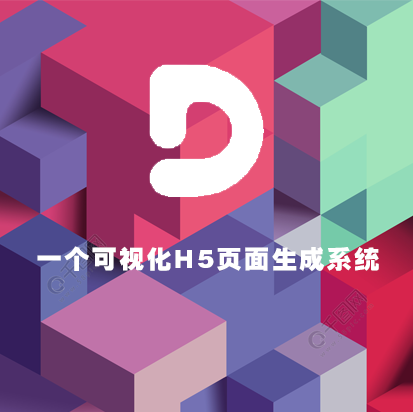
<style>
.page{position:relative;width:413px;height:412px}
.page>*{position:absolute;margin:0}
.t1{font:25px "HGCUH_CNKI";letter-spacing:0.1em;color:#ffffff}
</style>
<div class="page">
<p class="t1" style="left:37px;top:246px;width:342px;height:26px">一个可视化H5页面生成系统</p>
</div>
